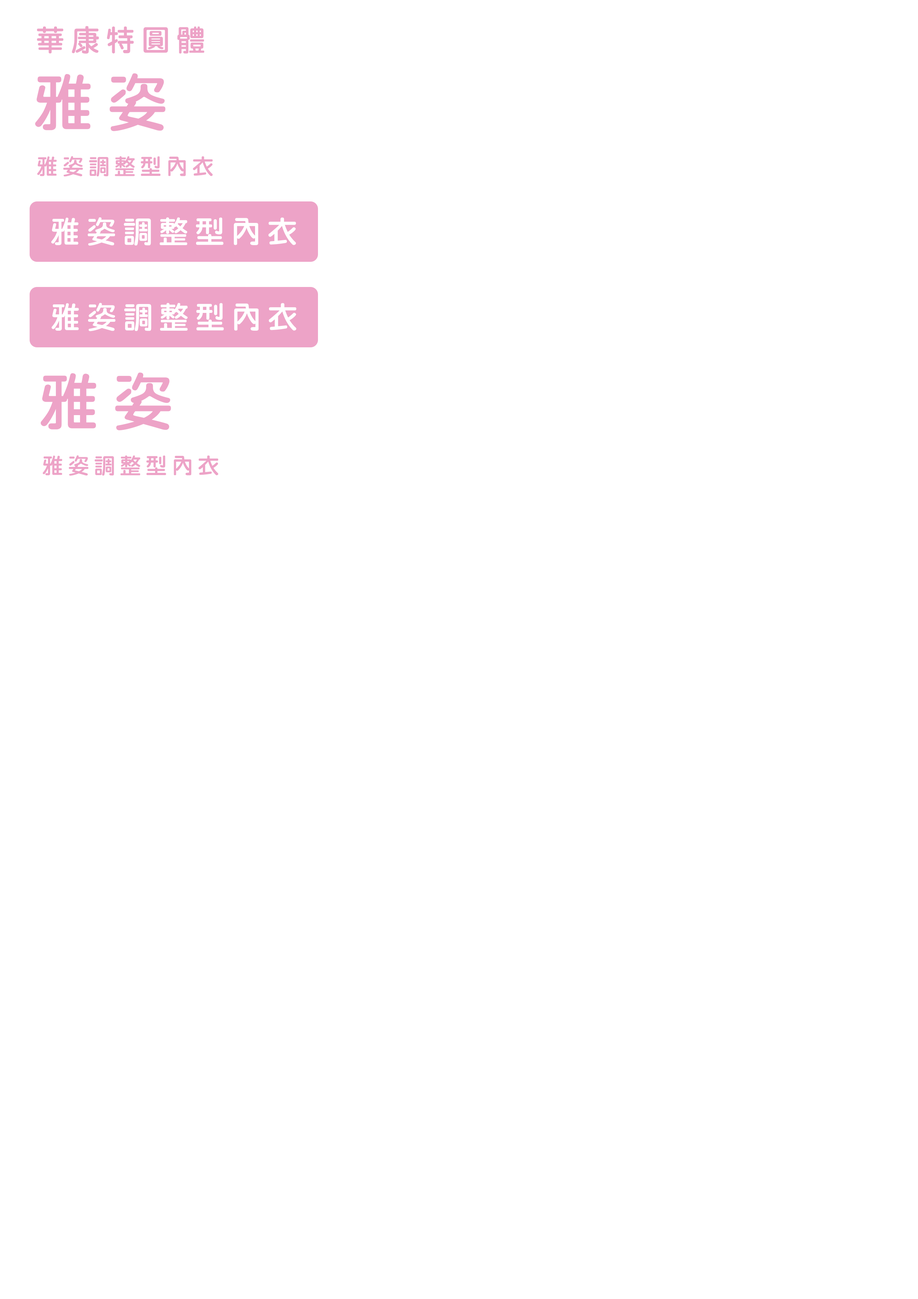
<style>
.page{position:relative;width:918px;height:1299px;background:#ffffff}
.page>*{position:absolute;margin:0}
.t1{font:29.8px "DFYuan-W8-WINP-BF";letter-spacing:0.205em;color:#eda3c7}
.t2{font:62.7px "DFYuan-W8-WINP-BF";letter-spacing:0.205em;color:#eda3c7}
.t3{font:22px "DFYuan-W8-WINP-BF";letter-spacing:0.205em;color:#eda3c7}
.t4{font:30.7px "DFYuan-W8-WINP-BF";letter-spacing:0.205em;color:#ffffff}
</style>
<div class="page">
<p class="t1" style="left:37px;top:26px;width:167px;height:28px">華康特圓體</p>
<p class="t2" style="left:35px;top:73px;width:130px;height:58px">雅姿</p>
<p class="t3" style="left:37px;top:156px;width:176px;height:21px">雅姿調整型內衣</p>
<p class="t4" style="left:51px;top:217px;width:245px;height:29px">雅姿調整型內衣</p>
</div>
